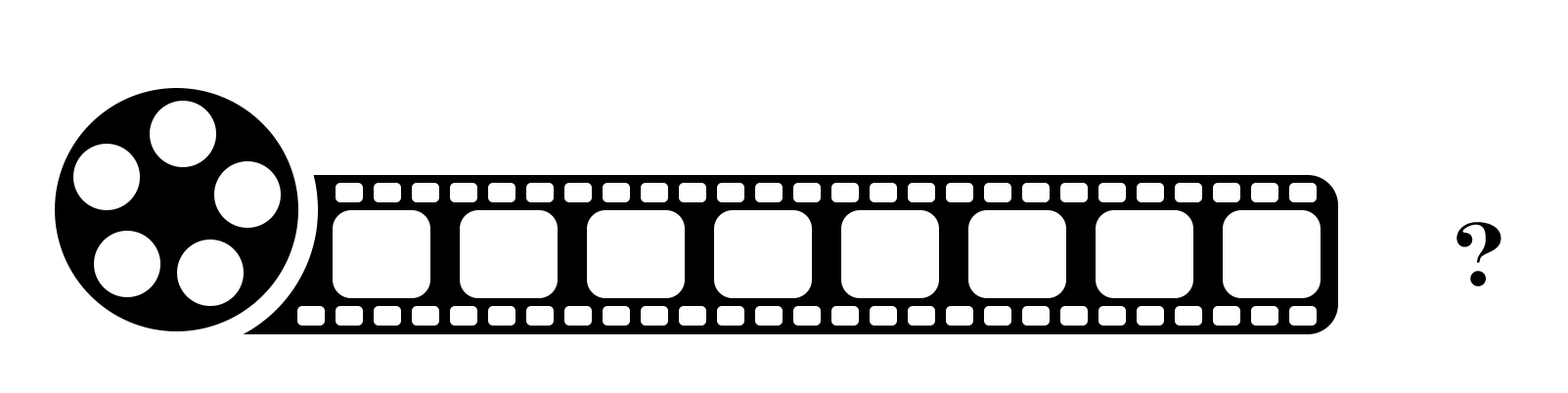
<style>
.page{position:relative;width:1568px;height:393px;background:#ffffff}
.page>*{position:absolute;margin:0}
.t1{font:89.4px "EngraversMT";letter-spacing:0.12em;color:#000000;font-weight:bold}
</style>
<div class="page">
<p class="t1" style="left:1456px;top:222px;width:45px;height:65px">?</p>
</div>
